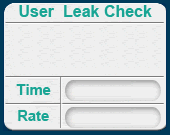
<style>
.page{position:relative;width:170px;height:135px;background:#efefef}
.page>*{position:absolute;margin:0}
.t1{font:16px "Arial-BoldMT";color:#19a594}
.t2{font:14.7px "Arial-BoldMT";color:#19a594}
</style>
<div class="page">
<p class="t1" style="left:19px;top:5px;width:133px;height:12px">User  Leak Check</p>
<p class="t2" style="left:16px;top:84px;width:35px;height:11px">Time</p>
<p class="t2" style="left:18px;top:110px;width:31px;height:11px">Rate</p>
</div>
